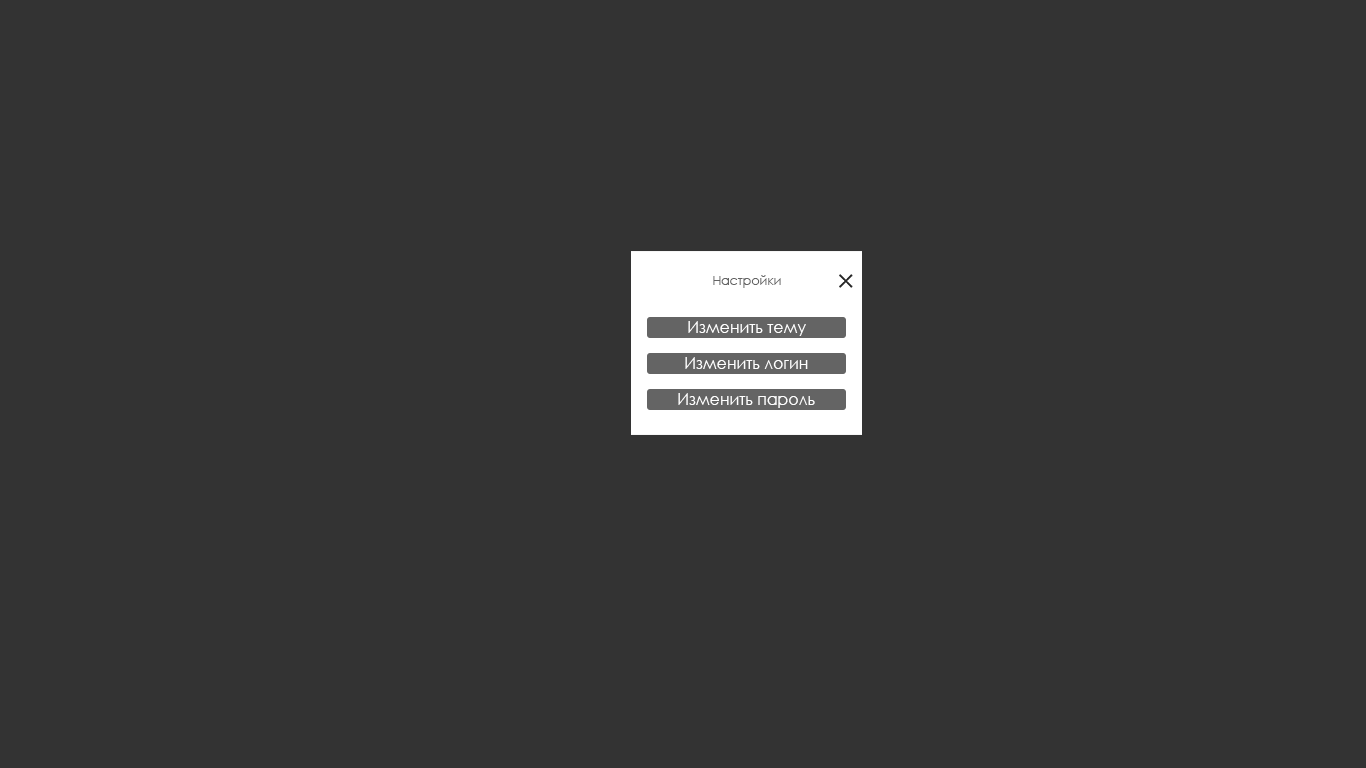
<style>
.page{position:relative;width:1366px;height:768px;background:#333333}
.page>*{position:absolute;margin:0}
.t1{font:12.6px "CenturyGothic";color:#646464}
.t2{font:15.9px "CenturyGothic";color:#ffffff}
</style>
<div class="page">
<p class="t1" style="left:713px;top:275px;width:68px;height:13px">Настройки</p>
<p class="t2" style="left:688px;top:321px;width:118px;height:15px">Изменить тему</p>
<p class="t2" style="left:685px;top:357px;width:123px;height:12px">Изменить логин</p>
<p class="t2" style="left:678px;top:393px;width:137px;height:15px">Изменить пароль</p>
</div>
